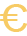
<style>
.page{position:relative;width:27px;height:36px;background:#ffffff}
.page>*{position:absolute;margin:0}
.t1{font:42px "FranklinGothic-Book";color:#f7cc65;scale:1.17 1}
</style>
<div class="page">
<p class="t1" style="left:0px;top:4px;width:28px;height:28px">€</p>
</div>
